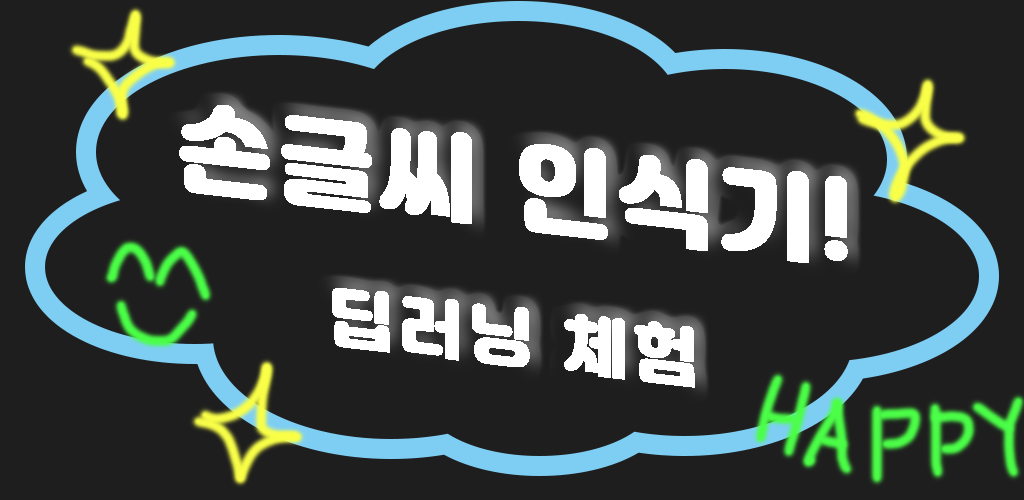
<style>
.page{position:relative;width:1024px;height:500px;background:#1e1e1e}
.page>*{position:absolute;margin:0}
.t1{font:96px "JalnanOTF";color:#ffffff;font-weight:bold}
.t2{font:64px "JalnanOTF";color:#ffffff;font-weight:bold}
</style>
<div class="page">
<p class="t1" style="left:179px;top:105px;width:669px;height:158px;rotate:6deg">손글씨 인식기!</p>
<p class="t2" style="left:332px;top:288px;width:363px;height:100px;rotate:6deg">딥러닝 체험</p>
</div>
